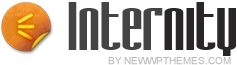
<style>
.page{position:relative;width:237px;height:65px;background:#ffffff}
.page>*{position:absolute;margin:0}
.t1{font:60px "SFIronGothicExtended";color:#454445}
.t2{font:60px "SFIronGothicExtended";color:#282626}
.t3{font:10px "ArialMT";color:#bbb9bb;text-transform:uppercase}
</style>
<div class="page">
<p class="t1" style="left:68px;top:2px;width:168px;height:54px">Inter<span class="t2">nity</span></p>
<p class="t3" style="left:108px;top:57px;width:123px;height:8px">by NewWpThemes.com</p>
</div>
